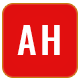
<style>
.page{position:relative;width:80px;height:80px;background:#e10f0f}
.page>*{position:absolute;margin:0}
.t1{font:37.5px "Oswald-Medium";letter-spacing:0.091em;color:#ffffff}
</style>
<div class="page">
<p class="t1" style="left:17px;top:25px;width:43px;height:30px">AH</p>
</div>
